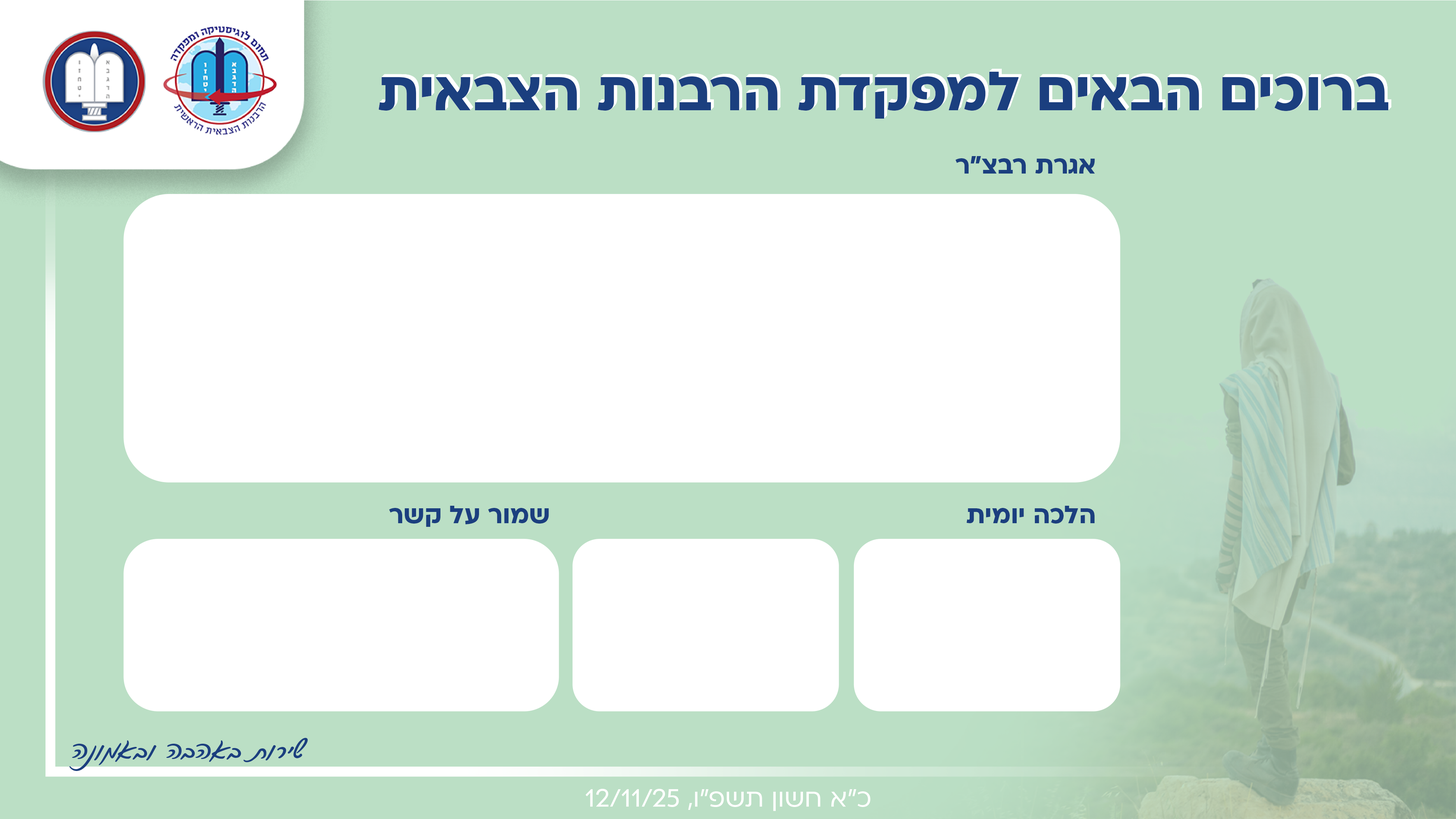
<style>
.page{position:relative;width:1456px;height:819px;background:#ffffff}
.page>*{position:absolute;margin:0}
.t1{font:63.8px "Ploni1.1AAA-Bold";color:#1b3f7f}
.t2{font:63.8px "Ploni1.1AAA-Bold";color:#1c4080}
.t3{font:63.8px "Ploni1.1AAA-Bold"}
.t4{font:28.8px "Ploni1.1AAA-Bold";color:#1c4080}
.t5{font:43.8px "FbLiddar-Bold";color:#1c4080}
.t6{font:28.8px "Ploni1.1AAA-Regular";color:#ffffff}
</style>
<div class="page">
<p class="t1" style="left:378px;top:71px;width:1010px;height:47px">ברוכים הבאים למפקדת הרבנות הצבאית</p>
<p class="t1" style="left:378px;top:72px;width:1010px;height:47px">ברוכים הבאים למפקדת הרבנות הצבאית</p>
<p class="t1" style="left:378px;top:72px;width:1010px;height:47px">ברוכים הבאים למפקדת הרבנות הצבאית</p>
<p class="t2" style="left:378px;top:72px;width:1010px;height:47px">ברוכים הבאים למפקדת הרבנות הצבאית</p>
<p class="t1" style="left:379px;top:71px;width:1010px;height:47px">ברוכים הבאים למפקדת הרבנות הצבאית</p>
<p class="t1" style="left:379px;top:71px;width:1010px;height:47px">ברוכים הבאים למפקדת הרבנות הצבאית</p>
<p class="t1" style="left:379px;top:71px;width:1010px;height:47px">ברוכים הבאים למפקדת הרבנות הצבאית</p>
<p class="t1" style="left:379px;top:71px;width:1010px;height:47px">ברוכים הבאים למפקדת הרבנות הצבאית</p>
<p class="t1" style="left:379px;top:71px;width:1010px;height:47px">ברוכים הבאים למפקדת הרבנות הצבאית</p>
<p class="t1" style="left:379px;top:71px;width:1010px;height:47px">ברוכים הבאים למפקדת הרבנות הצבאית</p>
<p class="t1" style="left:379px;top:71px;width:1010px;height:47px">ברוכים הבאים למפקדת הרבנות הצבאית</p>
<p class="t1" style="left:379px;top:71px;width:1010px;height:47px">ברוכים הבאים למפקדת הרבנות הצבאית</p>
<p class="t1" style="left:379px;top:71px;width:1010px;height:47px">ברוכים הבאים למפקדת הרבנות הצבאית</p>
<p class="t1" style="left:379px;top:71px;width:1010px;height:47px">ברוכים הבאים למפקדת הרבנות הצבאית</p>
<p class="t1" style="left:380px;top:71px;width:1009px;height:47px">ברוכים הבאים למפקדת הרבנות הצבאית</p>
<p class="t1" style="left:380px;top:71px;width:1009px;height:47px">ברוכים הבאים למפקדת הרבנות הצבאית</p>
<p class="t1" style="left:380px;top:71px;width:1009px;height:47px">ברוכים הבאים למפקדת הרבנות הצבאית</p>
<p class="t1" style="left:380px;top:71px;width:1009px;height:47px">ברוכים הבאים למפקדת הרבנות הצבאית</p>
<p class="t1" style="left:380px;top:70px;width:1010px;height:47px">ברוכים הבאים למפקדת הרבנות הצבאית</p>
<p class="t1" style="left:380px;top:70px;width:1010px;height:47px">ברוכים הבאים למפקדת הרבנות הצבאית</p>
<p class="t1" style="left:380px;top:70px;width:1010px;height:47px">ברוכים הבאים למפקדת הרבנות הצבאית</p>
<p class="t1" style="left:380px;top:70px;width:1010px;height:47px">ברוכים הבאים למפקדת הרבנות הצבאית</p>
<p class="t1" style="left:380px;top:70px;width:1010px;height:47px">ברוכים הבאים למפקדת הרבנות הצבאית</p>
<p class="t1" style="left:380px;top:70px;width:1010px;height:46px">ברוכים הבאים למפקדת הרבנות הצבאית</p>
<p class="t1" style="left:380px;top:70px;width:1010px;height:47px">ברוכים הבאים למפקדת הרבנות הצבאית</p>
<p class="t1" style="left:380px;top:70px;width:1010px;height:47px">ברוכים הבאים למפקדת הרבנות הצבאית</p>
<p class="t1" style="left:380px;top:70px;width:1010px;height:47px">ברוכים הבאים למפקדת הרבנות הצבאית</p>
<p class="t1" style="left:380px;top:70px;width:1010px;height:47px">ברוכים הבאים למפקדת הרבנות הצבאית</p>
<p class="t3" style="left:381px;top:69px;width:1010px;height:47px">ברוכים הבאים למפקדת הרבנות הצבאית</p>
<p class="t1" style="left:381px;top:70px;width:1010px;height:46px">ברוכים הבאים למפקדת הרבנות הצבאית</p>
<p class="t1" style="left:381px;top:70px;width:1010px;height:46px">ברוכים הבאים למפקדת הרבנות הצבאית</p>
<p class="t1" style="left:381px;top:70px;width:1010px;height:46px">ברוכים הבאים למפקדת הרבנות הצבאית</p>
<p class="t1" style="left:381px;top:70px;width:1010px;height:46px">ברוכים הבאים למפקדת הרבנות הצבאית</p>
<p class="t3" style="left:381px;top:69px;width:1010px;height:47px">ברוכים הבאים למפקדת הרבנות הצבאית</p>
<p class="t3" style="left:381px;top:69px;width:1010px;height:47px">ברוכים הבאים למפקדת הרבנות הצבאית</p>
<p class="t3" style="left:381px;top:69px;width:1010px;height:47px">ברוכים הבאים למפקדת הרבנות הצבאית</p>
<p class="t3" style="left:381px;top:69px;width:1010px;height:47px">ברוכים הבאים למפקדת הרבנות הצבאית</p>
<p class="t3" style="left:381px;top:69px;width:1010px;height:47px">ברוכים הבאים למפקדת הרבנות הצבאית</p>
<p class="t3" style="left:381px;top:69px;width:1010px;height:47px">ברוכים הבאים למפקדת הרבנות הצבאית</p>
<p class="t3" style="left:381px;top:69px;width:1010px;height:47px">ברוכים הבאים למפקדת הרבנות הצבאית</p>
<p class="t3" style="left:381px;top:69px;width:1010px;height:47px">ברוכים הבאים למפקדת הרבנות הצבאית</p>
<p class="t3" style="left:381px;top:69px;width:1010px;height:47px">ברוכים הבאים למפקדת הרבנות הצבאית</p>
<p class="t4" style="left:955px;top:156px;width:140px;height:18px">אגרת רבצ”ר</p>
<p class="t4" style="left:389px;top:506px;width:160px;height:21px">שמור על קשר</p>
<p class="t4" style="left:966px;top:506px;width:128px;height:18px">הלכה יומית</p>
<p class="t5" style="left:69px;top:738px;width:239px;height:33px">שירות באהבה ובאמונה</p>
<p class="t6" style="left:585px;top:789px;width:285px;height:22px">כ”א חשון תשפ”ו, 12/11/25</p>
</div>
